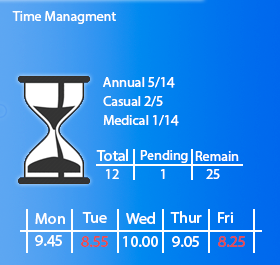
<style>
.page{position:relative;width:280px;height:265px}
.page>*{position:absolute;margin:0}
.t1{font:14px "MyriadHebrew-Regular";color:#ffffff}
.t2{font:16px "MyriadHebrew-Regular";color:#ffffff}
.t3{font:16px "MyriadHebrew-Regular";color:#ec4c4c}
.t4{font:16px "MyriadHebrew-Regular";color:#eb4c4c}
</style>
<div class="page">
<p class="t1" style="left:12px;top:11px;width:104px;height:13px">Time Managment</p>
<p class="t1" style="left:103px;top:77px;width:72px;height:11px">Annual 5/14</p>
<p class="t1" style="left:103px;top:96px;width:60px;height:11px">Casual 2/5</p>
<p class="t1" style="left:103px;top:115px;width:76px;height:11px">Medical 1/14</p>
<p class="t2" style="left:96px;top:149px;width:32px;height:12px">Total</p>
<p class="t1" style="left:140px;top:150px;width:48px;height:13px">Pending</p>
<p class="t1" style="left:195px;top:151px;width:44px;height:10px">Remain</p>
<p class="t1" style="left:106px;top:169px;width:13px;height:10px">12</p>
<p class="t1" style="left:161px;top:169px;width:4px;height:10px">1</p>
<p class="t1" style="left:206px;top:169px;width:14px;height:10px">25</p>
<p class="t2" style="left:35px;top:213px;width:30px;height:11px">Mon</p>
<p class="t2" style="left:82px;top:212px;width:25px;height:11px">Tue</p>
<p class="t2" style="left:126px;top:212px;width:29px;height:12px">Wed</p>
<p class="t2" style="left:170px;top:211px;width:32px;height:12px">Thur</p>
<p class="t2" style="left:218px;top:212px;width:15px;height:11px">Fri</p>
<p class="t2" style="left:35px;top:235px;width:27px;height:12px">9.45</p>
<p class="t3" style="left:81px;top:236px;width:27px;height:11px">8.55</p>
<p class="t2" style="left:123px;top:236px;width:35px;height:11px">10.00</p>
<p class="t2" style="left:172px;top:236px;width:27px;height:11px">9.05</p>
<p class="t4" style="left:218px;top:236px;width:27px;height:11px">8.25</p>
</div>
